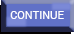
<style>
.page{position:relative;width:74px;height:34px;background:#6171c7}
.page>*{position:absolute;margin:0}
.t1{font:11px "Roboto-Regular";color:#ffffff}
</style>
<div class="page">
<p class="t1" style="left:10px;top:11px;width:54px;height:8px">CONTINUE</p>
</div>
